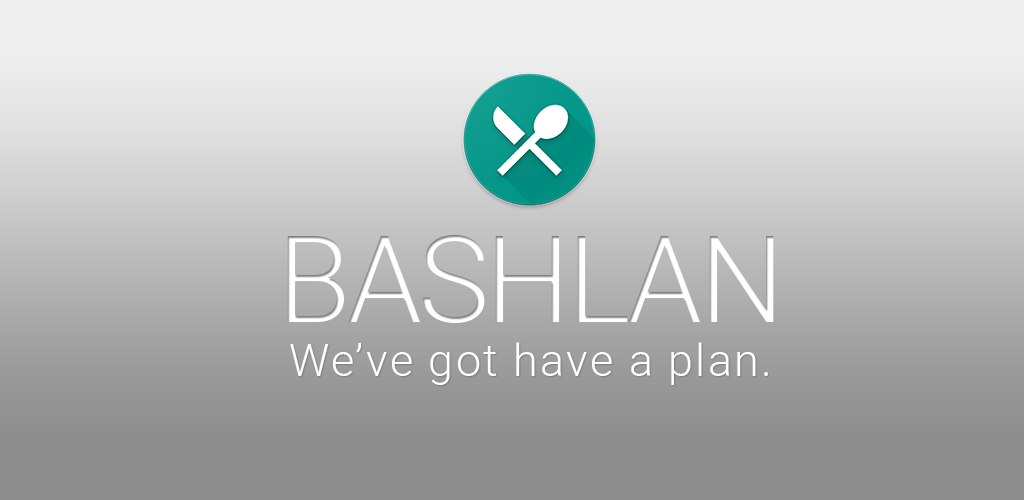
<style>
.page{position:relative;width:1024px;height:500px}
.page>*{position:absolute;margin:0}
.t1{font:120px "Heebo-Light";letter-spacing:-0.03em;color:#ffffff}
.t2{font:45px "Heebo-Light";letter-spacing:0.05em;color:#ffffff}
</style>
<div class="page">
<p class="t1" style="left:287px;top:235px;width:487px;height:88px">BASHLAN</p>
<p class="t2" style="left:290px;top:342px;width:478px;height:43px"><span class="t1"><br></span>We’ve got have a plan.</p>
</div>
